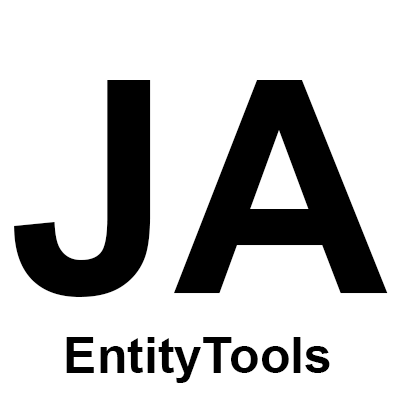
<style>
.page{position:relative;width:396px;height:396px;background:#ffffff}
.page>*{position:absolute;margin:0}
.t1{font:296.5px "Arial-BoldMT";color:#000000}
.t2{font:50px "Arial-BoldMT";color:#000000}
</style>
<div class="page">
<p class="t1" style="left:14px;top:80px;width:374px;height:217px">JA</p>
<p class="t2" style="left:66px;top:337px;width:264px;height:46px">EntityTools</p>
</div>
